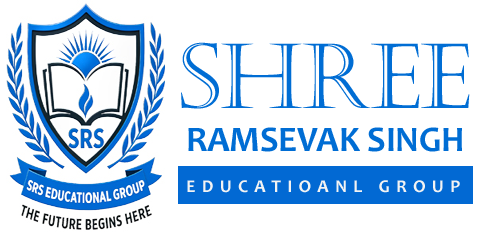
<style>
.page{position:relative;width:478px;height:234px;background:#ffffff}
.page>*{position:absolute;margin:0}
.t1{font:36px "Candara-Bold";letter-spacing:-0.01em;color:#006dd4}
.t2{font:90px "Castellar";letter-spacing:-0.01em;color:#006dd4}
.t3{font:18px "Candara-Bold";letter-spacing:0.35em;color:#f3f3f3}
</style>
<div class="page">
<p class="t1" style="left:181px;top:42px;width:289px;height:110px;text-align:center"><span class="t2">SHREE <br></span>RAMSEVAK SINGH</p>
<p class="t3" style="left:187px;top:180px;width:273px;height:13px">EDUCATIOANL GROUP</p>
</div>
